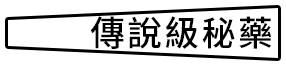
<style>
.page{position:relative;width:286px;height:66px;background:#ffffff}
.page>*{position:absolute;margin:0}
.t1{font:35px "NotoSansCJKtc-Medium";letter-spacing:0.06em;color:#000000}
</style>
<div class="page">
<p class="t1" style="left:90px;top:16px;width:181px;height:33px">傳說級秘藥</p>
</div>
